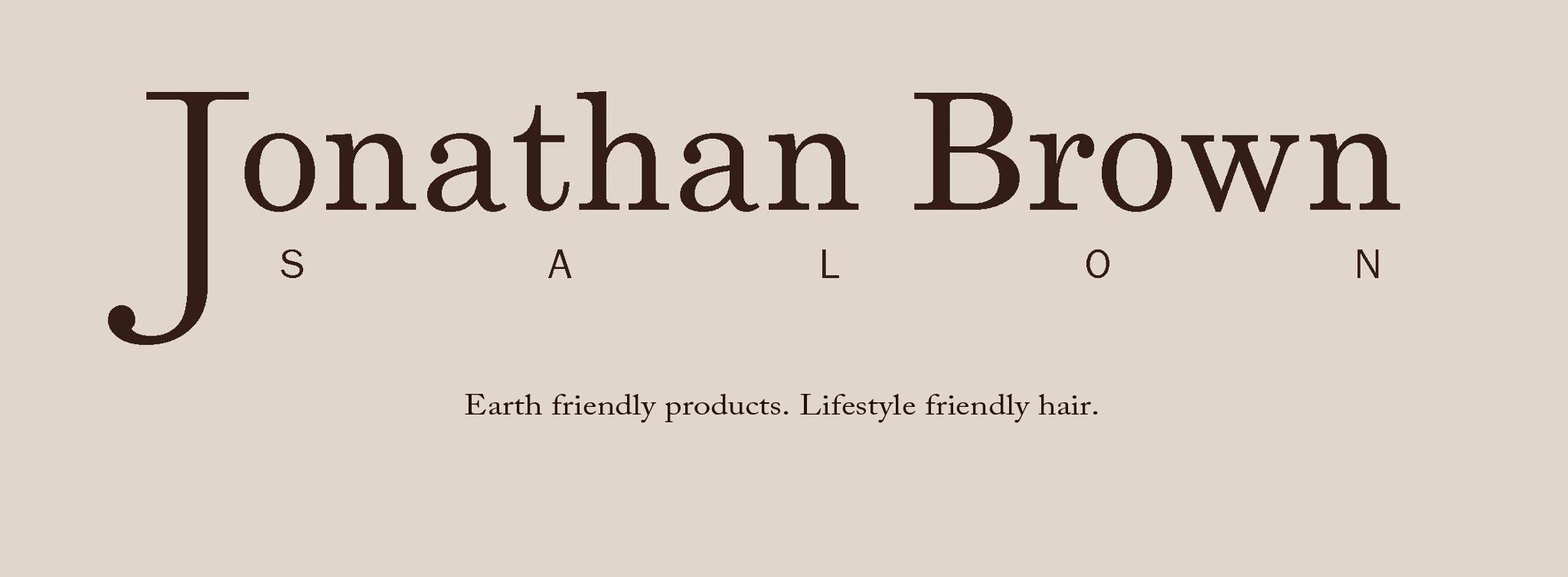
<style>
.page{position:relative;width:1568px;height:577px;background:#e0d6cc}
.page>*{position:absolute;margin:0}
.t1{font:29.1px "ACaslonPro-Regular";color:#270f05;scale:1.16 1}
</style>
<div class="page">
<p class="t1" style="left:465px;top:394px;width:633px;height:29px">Earth friendly products. Lifestyle friendly hair.</p>
</div>
